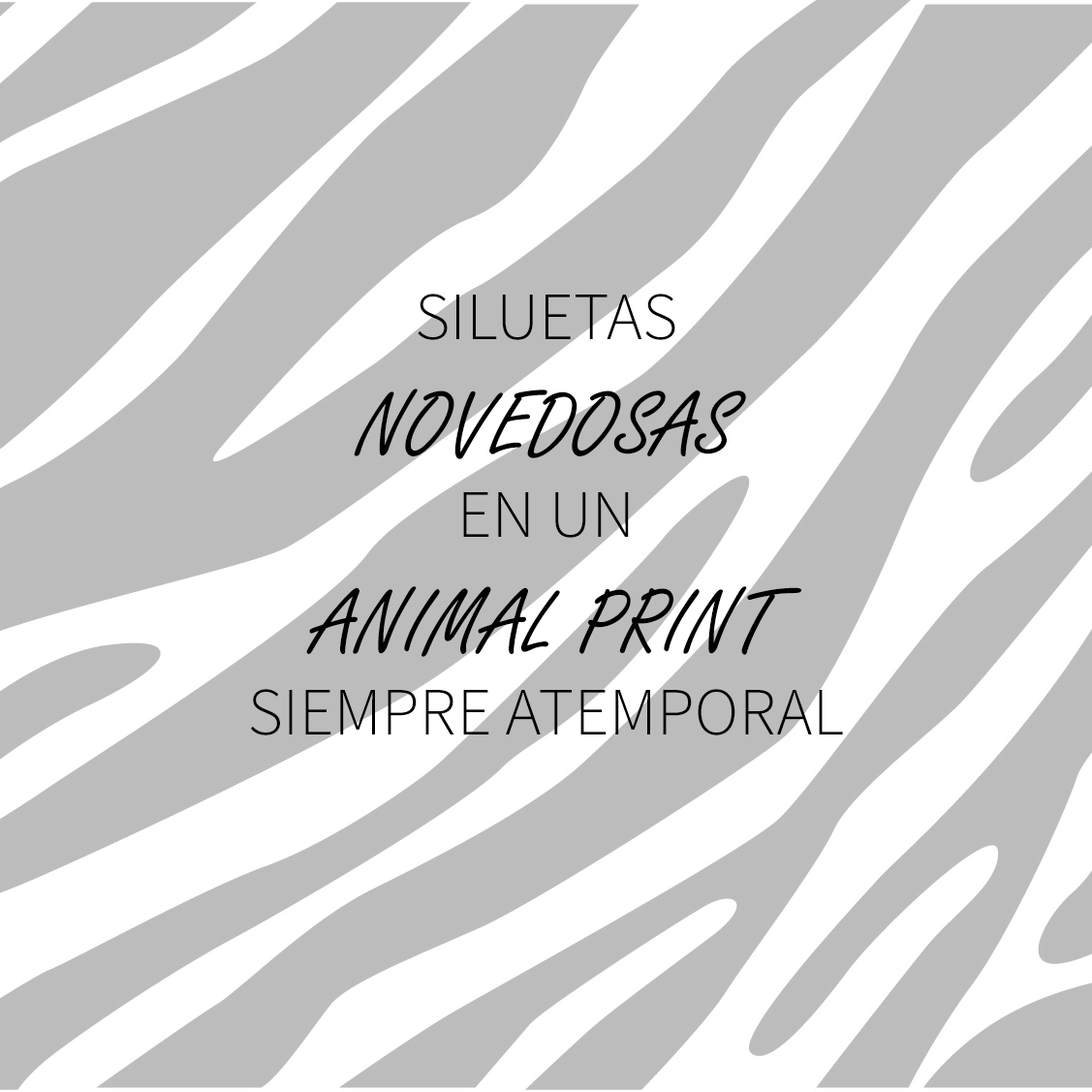
<style>
.page{position:relative;width:1092px;height:1092px;background:#bdbcbd}
.page>*{position:absolute;margin:0}
.t1{font:67.8px "SourceSansPro-Light";color:#000000}
.t2{font:96.9px "FreestyleScript-Regular";color:#000000}
</style>
<div class="page">
<p class="t1" style="left:250px;top:294px;width:593px;height:441px;text-align:center">SILUETAS<br><span class="t2">NOVEDOSAS<br></span>EN UN<br><span class="t2">ANIMAL PRINT<br></span>SIEMPRE ATEMPORAL</p>
</div>
